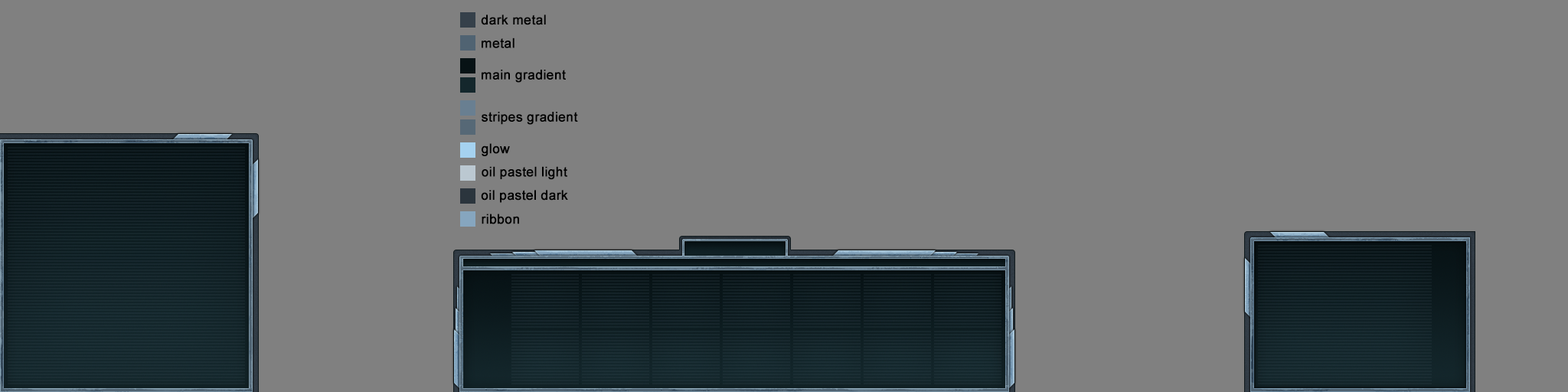
<style>
.page{position:relative;width:1568px;height:392px;background:#808080}
.page>*{position:absolute;margin:0}
.t1{font:13.3px "ArialMT";color:#000000;font-weight:bold}
</style>
<div class="page">
<p class="t1" style="left:481px;top:15px;width:65px;height:10px">dark metal</p>
<p class="t1" style="left:482px;top:38px;width:32px;height:10px">metal</p>
<p class="t1" style="left:482px;top:70px;width:84px;height:13px">main gradient</p>
<p class="t1" style="left:482px;top:112px;width:96px;height:13px">stripes gradient</p>
<p class="t1" style="left:482px;top:143px;width:28px;height:13px">glow</p>
<p class="t1" style="left:482px;top:166px;width:85px;height:14px">oil pastel light</p>
<p class="t1" style="left:481px;top:190px;width:87px;height:13px">oil pastel dark</p>
<p class="t1" style="left:482px;top:214px;width:37px;height:10px">ribbon</p>
</div>
